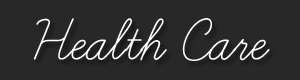
<style>
.page{position:relative;width:300px;height:80px;background:#282828}
.page>*{position:absolute;margin:0}
.t1{font:72px "LearningCurve";color:#ffffff}
</style>
<div class="page">
<p class="t1" style="left:33px;top:18px;width:237px;height:43px">Health Care</p>
</div>
